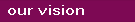
<style>
.page{position:relative;width:135px;height:22px;background:#7d0954}
.page>*{position:absolute;margin:0}
.t1{font:12.5px "ArialMT";color:#fdfcfd;scale:1.45 1}
</style>
<div class="page">
<p class="t1" style="left:8px;top:5px;width:76px;height:10px">our vision</p>
</div>
